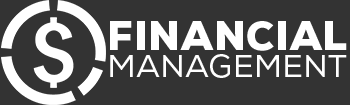
<style>
.page{position:relative;width:350px;height:105px;background:#333333}
.page>*{position:absolute;margin:0}
.t1{font:31.5px/27px "NexaRegular";letter-spacing:0.02em;color:#ffffff;text-transform:uppercase}
.t2{font:40px/27px "NexaBlack";letter-spacing:0.02em;color:#ffffff;text-transform:uppercase}
</style>
<div class="page">
<p class="t1" style="left:110px;top:21px;width:237px;height:57px;text-align:right"><span class="t2">FINANCIAL<br></span>MANAGEMENT</p>
</div>
